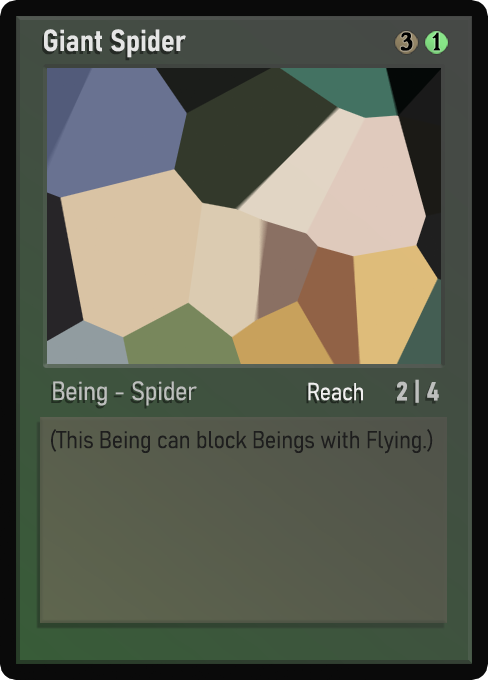
<style>
.page{position:relative;width:488px;height:680px}
.page>*{position:absolute;margin:0}
.t1{font:30px "Bahnschrift-SemiBoldSemiCondensed";color:#f2f2f2;font-weight:bold}
.t2{font:25px "WTRRoycroft";color:#000000;font-weight:bold;scale:1.09 1}
.t3{font:26px "Bahnschrift-LightSemiCondensed";color:#c8c8c8;font-weight:bold}
.t4{font:24px "Bahnschrift-LightSemiCondensed";color:#f0efef;font-weight:bold}
.t5{font:26px "Bahnschrift-BoldSemiCondensed";color:#bdbfbd;font-weight:bold}
.t6{font:24px "Bahnschrift-LightSemiCondensed";color:#1e1e1e;font-weight:bold}
</style>
<div class="page">
<p class="t1" style="left:44px;top:29px;width:142px;height:29px;opacity:0.9">Giant Spider</p>
<p class="t2" style="left:400px;top:32px;width:13px;height:19px">3</p>
<p class="t2" style="left:432px;top:32px;width:9px;height:19px">1</p>
<p class="t3" style="left:53px;top:381px;width:144px;height:25px;opacity:0.9">Being - Spider</p>
<p class="t4" style="left:308px;top:382px;width:55px;height:19px">Reach</p>
<p class="t5" style="left:397px;top:379px;width:42px;height:24px">2 | 4</p>
<p class="t6" style="left:51px;top:429px;width:382px;height:25px">(This Being can block Beings with Flying.)</p>
</div>
